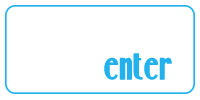
<style>
.page{position:relative;width:200px;height:100px;background:#ffffff}
.page>*{position:absolute;margin:0}
.t1{font:37.4px "StonyIslandNF";color:#21b1ed;font-weight:bold}
</style>
<div class="page">
<p class="t1" style="left:104px;top:53px;width:68px;height:27px">enter</p>
</div>
